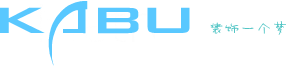
<style>
.page{position:relative;width:289px;height:66px;background:#ffffff}
.page>*{position:absolute;margin:0}
.t1{font:82.8px "Backslash";color:#59c8ff;scale:0.87 1}
.t2{font:16px "--";color:#52c5c5}
</style>
<div class="page">
<p class="t1" style="left:0px;top:1px;width:190px;height:65px">KABU</p>
<p class="t2" style="left:210px;top:21px;width:76px;height:14px">装饰一个梦</p>
</div>
